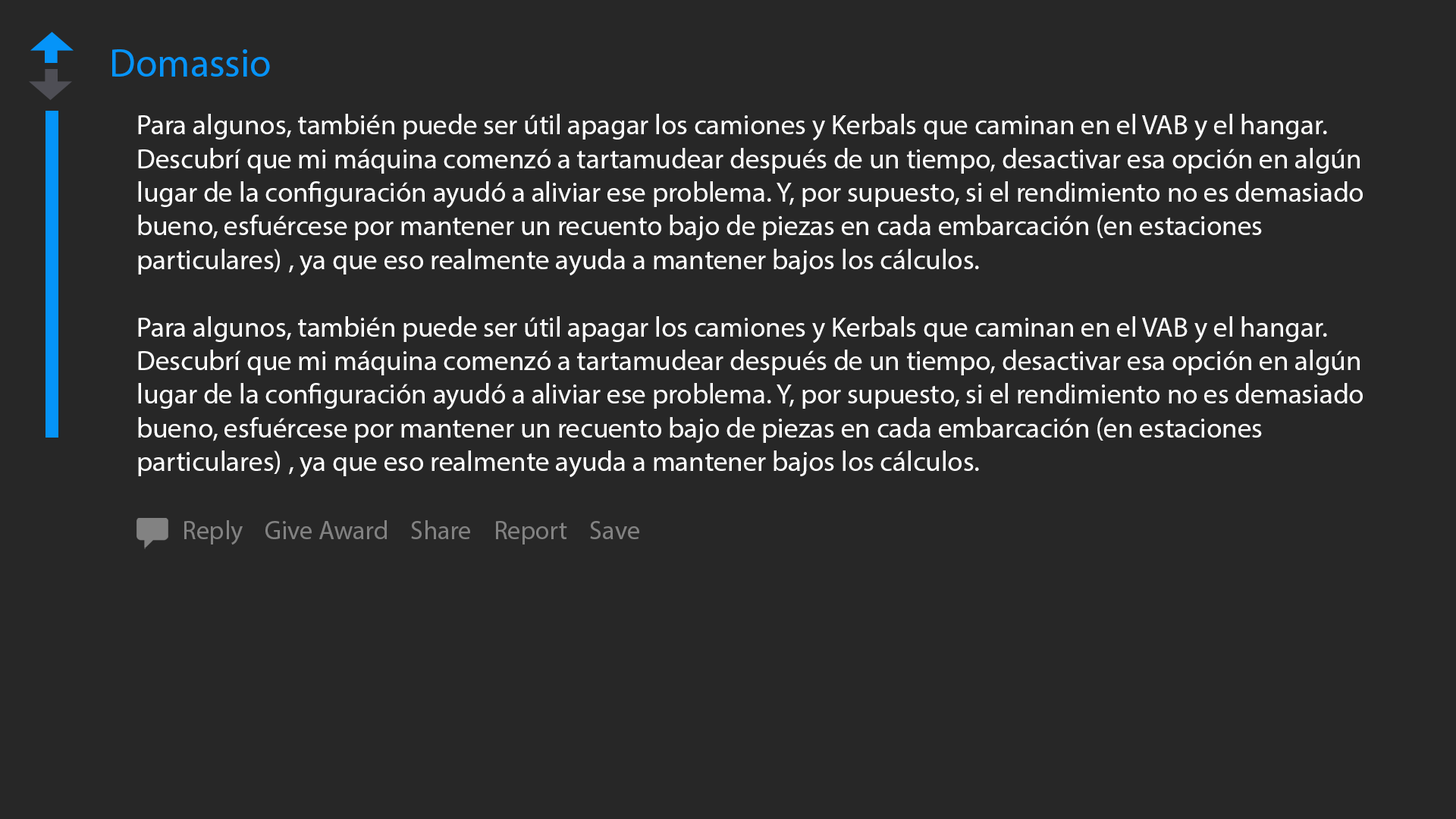
<style>
.page{position:relative;width:1456px;height:819px;background:#272727}
.page>*{position:absolute;margin:0}
.t1{font:39.4px "MyriadPro-Regular";color:#0594f8}
.t2{font:28.1px "MyriadPro-Regular";color:#ffffff}
.t3{font:26px "MyriadPro-Regular";color:#828282}
</style>
<div class="page">
<p class="t1" style="left:112px;top:49px;width:158px;height:28px">Domassio</p>
<p class="t2" style="left:138px;top:114px;width:1225px;height:363px">Para algunos, también puede ser útil apagar los camiones y Kerbals que caminan en el VAB y el hangar. Descubrí que mi máquina comenzó a tartamudear después de un tiempo, desactivar esa opción en algún lugar de la configuración ayudó a aliviar ese problema. Y, por supuesto, si el rendimiento no es demasiado bueno, esfuércese por mantener un recuento bajo de piezas en cada embarcación (en estaciones particulares) , ya que eso realmente ayuda a mantener bajos los cálculos. <br><br>Para algunos, también puede ser útil apagar los camiones y Kerbals que caminan en el VAB y el hangar. Descubrí que mi máquina comenzó a tartamudear después de un tiempo, desactivar esa opción en algún lugar de la configuración ayudó a aliviar ese problema. Y, por supuesto, si el rendimiento no es demasiado bueno, esfuércese por mantener un recuento bajo de piezas en cada embarcación (en estaciones particulares) , ya que eso realmente ayuda a mantener bajos los cálculos.</p>
<p class="t3" style="left:184px;top:520px;width:455px;height:25px">Reply    Give Award    Share    Report    Save</p>
</div>
